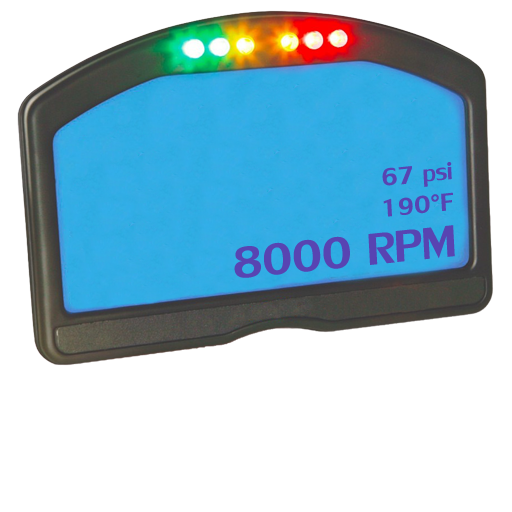
<style>
.page{position:relative;width:512px;height:512px;background:#ffffff}
.page>*{position:absolute;margin:0}
.t1{font:36.9px "LilyUPC";color:#5844b2}
.t2{font:66.5px "LilyUPC";color:#5844b2}
</style>
<div class="page">
<p class="t1" style="left:382px;top:162px;width:70px;height:25px;rotate:-6deg">67 psi</p>
<p class="t1" style="left:383px;top:192px;width:70px;height:25px;rotate:-6deg">190°F</p>
<p class="t2" style="left:234px;top:225px;width:221px;height:53px;rotate:-6deg">8000 RPM</p>
</div>
